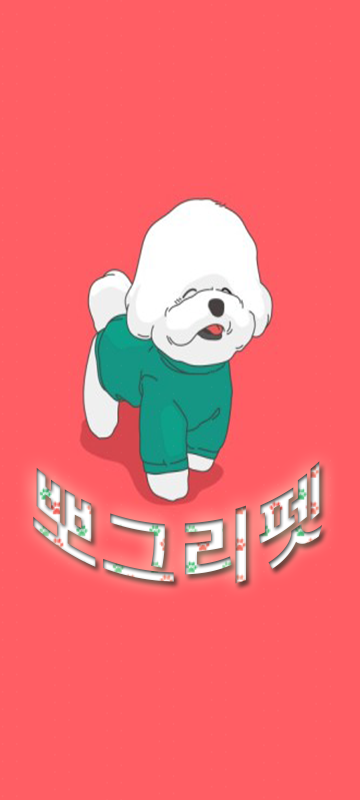
<style>
.page{position:relative;width:360px;height:800px;background:#ff5e64}
.page>*{position:absolute;margin:0}
.t1{font:80px "NotoSansMonoCJKkr-Bold"}
</style>
<div class="page">
<p class="t1" style="left:33px;top:461px;width:290px;height:123px">뽀그리펫</p>
</div>
